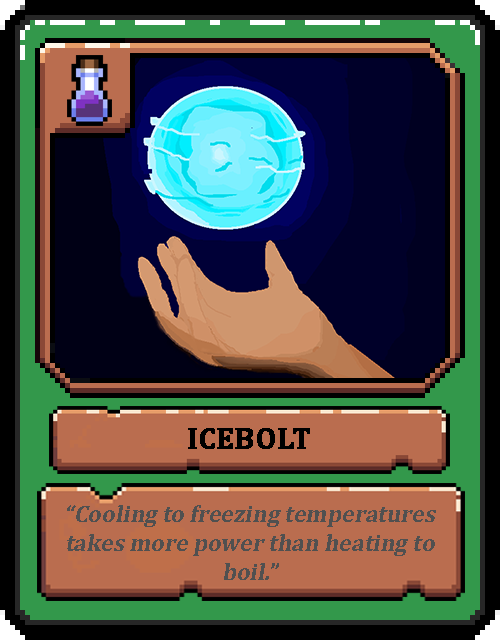
<style>
.page{position:relative;width:500px;height:640px}
.page>*{position:absolute;margin:0}
.t1{font:30px "Cambria-Bold";color:#000000;text-transform:uppercase;font-weight:bold}
.t2{font:24px "Cambria-Bold";color:#505050;font-style:italic}
</style>
<div class="page">
<p class="t1" style="left:188px;top:428px;width:122px;height:21px">Icebolt</p>
<p class="t2" style="left:67px;top:505px;width:369px;height:75px;text-align:center">“Cooling to freezing temperatures takes more power than heating to boil.”</p>
</div>
